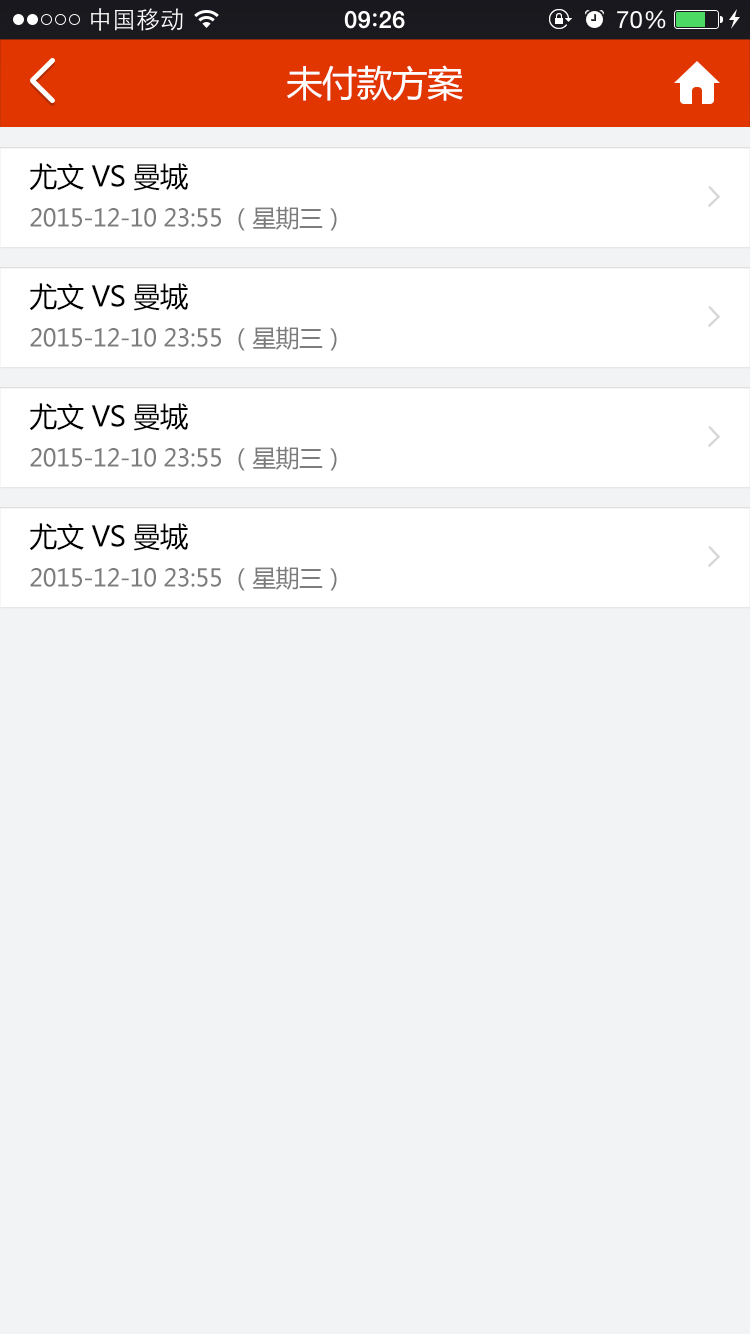
<style>
.page{position:relative;width:750px;height:1334px;background:#f2f3f5}
.page>*{position:absolute;margin:0}
.t1{font:36px "MicrosoftYaHei";letter-spacing:-0.025em;color:#ffffff}
.t2{font:28px "MicrosoftYaHei";letter-spacing:-0.025em;color:#000000}
.t3{font:24px "MicrosoftYaHei";letter-spacing:-0.025em;color:#7c7c7c}
</style>
<div class="page">
<p class="t1" style="left:287px;top:65px;width:176px;height:36px">未付款方案</p>
<p class="t2" style="left:29px;top:163px;width:159px;height:28px">尤文 VS 曼城</p>
<p class="t3" style="left:30px;top:206px;width:307px;height:25px">2015-12-10 23:55 （星期三）</p>
<p class="t2" style="left:29px;top:283px;width:159px;height:28px">尤文 VS 曼城</p>
<p class="t3" style="left:30px;top:326px;width:307px;height:25px">2015-12-10 23:55 （星期三）</p>
<p class="t2" style="left:29px;top:403px;width:159px;height:28px">尤文 VS 曼城</p>
<p class="t3" style="left:30px;top:446px;width:307px;height:25px">2015-12-10 23:55 （星期三）</p>
<p class="t2" style="left:29px;top:523px;width:159px;height:28px">尤文 VS 曼城</p>
<p class="t3" style="left:30px;top:566px;width:307px;height:25px">2015-12-10 23:55 （星期三）</p>
</div>
